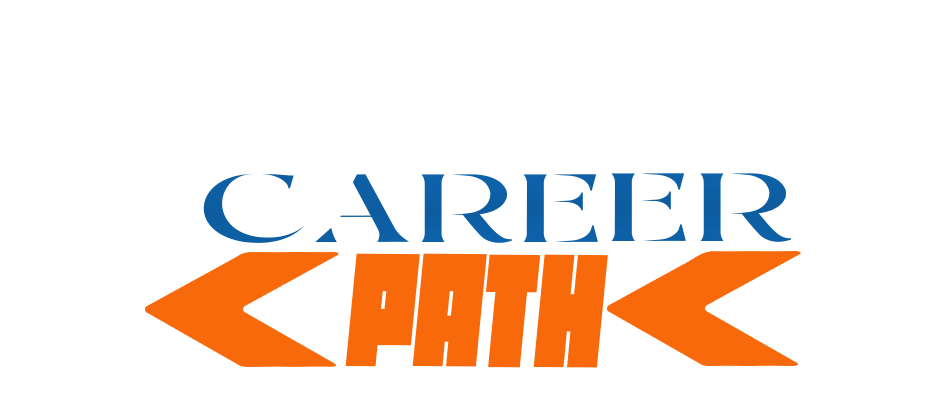
<style>
.page{position:relative;width:942px;height:408px;background:#ffffff}
.page>*{position:absolute;margin:0}
.t1{font:105px "VodanDemo";letter-spacing:0.05em;color:#0d5fa4;scale:1.59 1}
.t2{font:140.6px "RombiTechnocratPERSONAL-Bold";color:#f7690a;scale:0.8 1}
</style>
<div class="page">
<p class="t1" style="left:203px;top:173px;width:589px;height:70px">CAREER</p>
<p class="t2" style="left:345px;top:253px;width:263px;height:115px">PATH</p>
</div>
